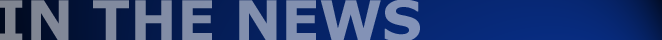
<style>
.page{position:relative;width:662px;height:40px}
.page>*{position:absolute;margin:0}
.t1{font:56px "Verdana-Bold";letter-spacing:-0.005em;color:#828fac}
</style>
<div class="page">
<p class="t1" style="left:0px;top:0px;width:420px;height:42px">IN THE NEWS</p>
</div>
